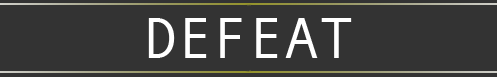
<style>
.page{position:relative;width:497px;height:77px;background:#333333}
.page>*{position:absolute;margin:0}
.t1{font:58.3px "AndaleMono";color:#ffffff}
</style>
<div class="page">
<p class="t1" style="left:148px;top:18px;width:204px;height:40px">DEFEAT</p>
</div>
